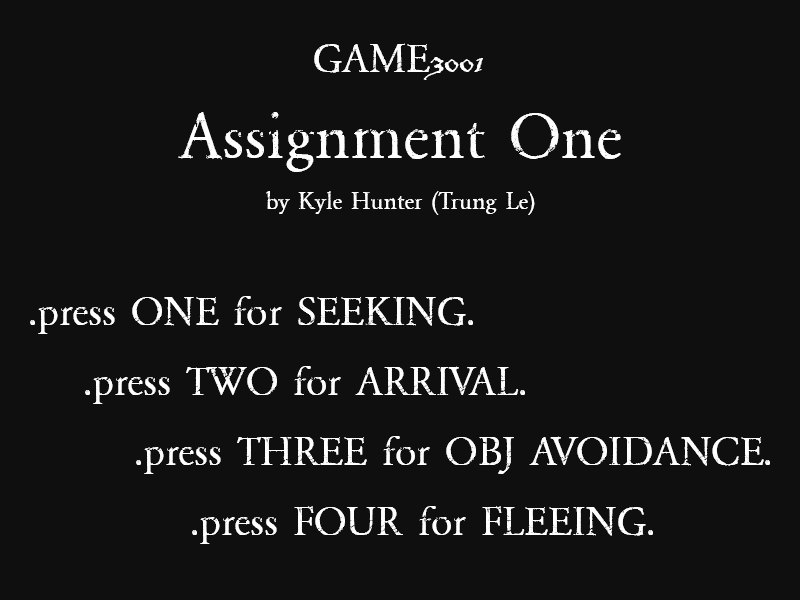
<style>
.page{position:relative;width:800px;height:600px;background:#0f0f0f}
.page>*{position:absolute;margin:0}
.t1{font:41.7px "NIGHTMAREPILLS";color:#ffffff}
.t2{font:41.7px "BlackadderITC-Regular";color:#ffffff}
.t3{font:66.7px "NIGHTMAREPILLS";color:#ffffff}
.t4{font:25px "NIGHTMAREPILLS";color:#ffffff}
</style>
<div class="page">
<p class="t1" style="left:314px;top:43px;width:169px;height:37px">GAME<span class="t2">3001</span></p>
<p class="t3" style="left:178px;top:112px;width:443px;height:60px">Assignment One</p>
<p class="t4" style="left:266px;top:191px;width:269px;height:24px">by Kyle Hunter (Trung Le)</p>
<p class="t1" style="left:30px;top:296px;width:443px;height:38px">.press ONE for SEEKING.</p>
<p class="t1" style="left:85px;top:366px;width:440px;height:38px">.press TWO for ARRIVAL.</p>
<p class="t1" style="left:136px;top:436px;width:634px;height:38px">.press THREE for OBJ AVOIDANCE.</p>
<p class="t1" style="left:192px;top:506px;width:461px;height:38px">.press FOUR for FLEEING.</p>
</div>
